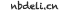
<style>
.page{position:relative;width:64px;height:13px;background:#ffffff}
.page>*{position:absolute;margin:0}
.t1{font:9px "Chalkduster";color:#333333}
</style>
<div class="page">
<p class="t1" style="left:11px;top:0px;width:48px;height:10px">nbdeli.cn</p>
</div>
